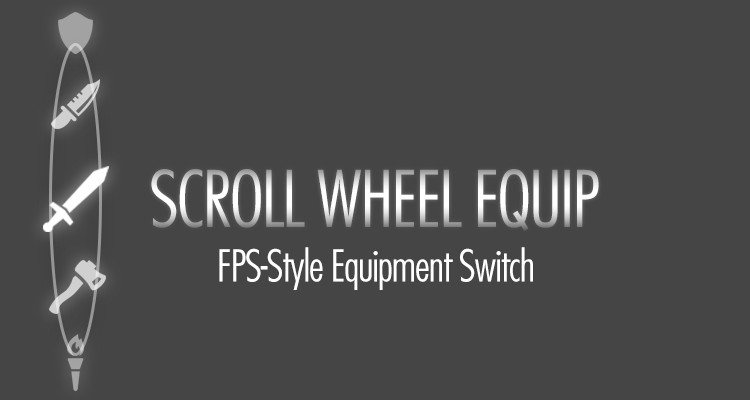
<style>
.page{position:relative;width:750px;height:400px;background:#454545}
.page>*{position:absolute;margin:0}
.t1{font:76px "FuturaStd-CondensedLight";letter-spacing:-0.025em}
.t2{font:42.8px "FuturaStd-CondensedLight";letter-spacing:-0.025em;color:#ffffff}
</style>
<div class="page">
<p class="t1" style="left:151px;top:169px;width:448px;height:63px">SCROLL WHEEL EQUIP</p>
<p class="t2" style="left:219px;top:247px;width:314px;height:43px">FPS-Style Equipment Switch</p>
</div>
